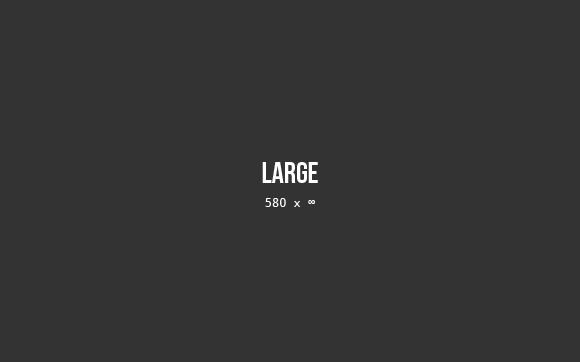
<style>
.page{position:relative;width:580px;height:362px;background:#333333}
.page>*{position:absolute;margin:0}
.t1{font:30px "BebasNeue";color:#ffffff}
.t2{font:12px "DroidSansMono";color:#ffffff}
</style>
<div class="page">
<p class="t1" style="left:262px;top:162px;width:56px;height:21px">Large</p>
<p class="t2" style="left:265px;top:198px;width:50px;height:9px">580 x ∞</p>
</div>
